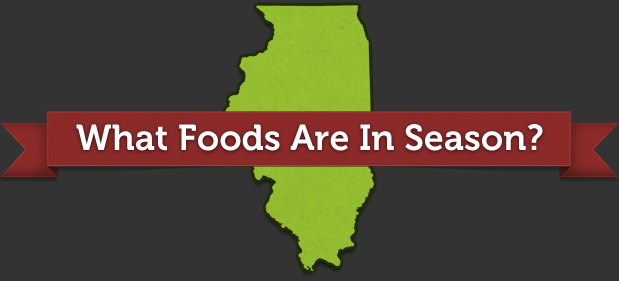
<style>
.page{position:relative;width:619px;height:281px;background:#333333}
.page>*{position:absolute;margin:0}
.t1{font:36px "Museo-700";color:#ffffff}
</style>
<div class="page">
<p class="t1" style="left:76px;top:124px;width:467px;height:27px">What Foods Are In Season?</p>
</div>
